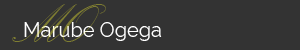
<style>
.page{position:relative;width:300px;height:50px;background:#333333}
.page>*{position:absolute;margin:0}
.t1{font:20px "Raleway";color:#ffffff}
</style>
<div class="page">
<p class="t1" style="left:24px;top:22px;width:138px;height:19px">Marube Ogega</p>
</div>
